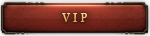
<style>
.page{position:relative;width:150px;height:36px}
.page>*{position:absolute;margin:0}
.t1{font:11.5px "Georgia";letter-spacing:0.25em;text-transform:uppercase}
</style>
<div class="page">
<p class="t1" style="left:62px;top:14px;width:25px;height:9px">VIP</p>
<p class="t1" style="left:62px;top:13px;width:25px;height:9px">VIP</p>
<p class="t1" style="left:62px;top:13px;width:25px;height:9px">VIP</p>
<p class="t1" style="left:62px;top:13px;width:25px;height:9px">VIP</p>
</div>
